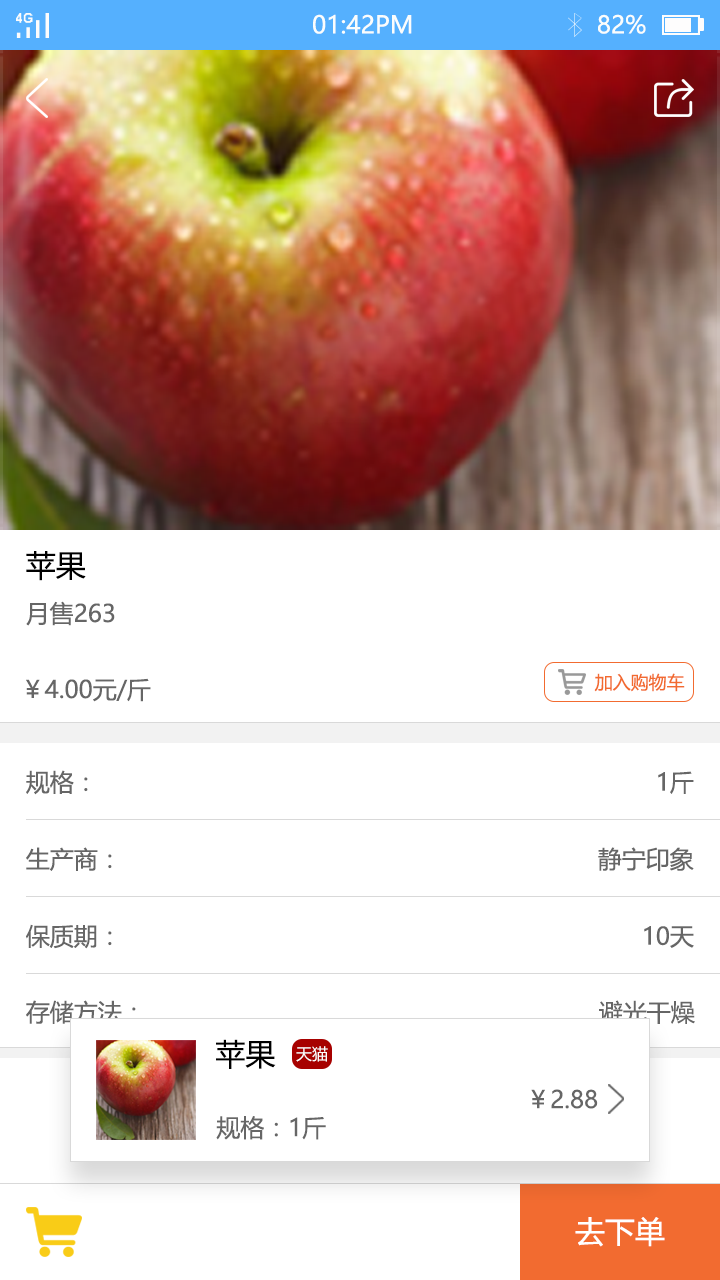
<style>
.page{position:relative;width:720px;height:1280px;background:#ffffff}
.page>*{position:absolute;margin:0}
.t1{font:24px "MicrosoftYaHei";color:#fbfdfc}
.t2{font:30px "MicrosoftYaHei";color:#000000}
.t3{font:24px "MicrosoftYaHei";color:#666666}
.t4{font:18px "MicrosoftYaHei";color:#f26b30}
.t5{font:16px "MicrosoftYaHei";color:#ffffff}
.t6{font:30px "MicrosoftYaHei";color:#ffffff}
</style>
<div class="page">
<p class="t1" style="left:313px;top:14px;width:99px;height:20px">01:42PM</p>
<p class="t1" style="left:598px;top:14px;width:48px;height:20px">82%</p>
<p class="t2" style="left:26px;top:551px;width:60px;height:30px">苹果</p>
<p class="t3" style="left:26px;top:601px;width:89px;height:25px">月售263</p>
<p class="t3" style="left:26px;top:678px;width:125px;height:24px">￥4.00元/斤</p>
<p class="t4" style="left:594px;top:673px;width:91px;height:19px">加入购物车</p>
<p class="t3" style="left:26px;top:770px;width:62px;height:25px">规格：</p>
<p class="t3" style="left:658px;top:771px;width:36px;height:23px">1斤</p>
<p class="t3" style="left:26px;top:847px;width:86px;height:24px">生产商：</p>
<p class="t3" style="left:598px;top:847px;width:96px;height:24px">静宁印象</p>
<p class="t3" style="left:26px;top:924px;width:86px;height:25px">保质期：</p>
<p class="t3" style="left:644px;top:926px;width:50px;height:22px">10天</p>
<p class="t3" style="left:26px;top:1000px;width:110px;height:24px">存储方法：</p>
<p class="t3" style="left:599px;top:1000px;width:96px;height:24px">避光干燥</p>
<p class="t2" style="left:216px;top:1039px;width:60px;height:30px">苹果</p>
<p class="t5" style="left:296px;top:1046px;width:32px;height:16px">天猫</p>
<p class="t3" style="left:531px;top:1089px;width:67px;height:20px">￥2.88</p>
<p class="t3" style="left:216px;top:1116px;width:110px;height:24px">规格：1斤</p>
<p class="t6" style="left:575px;top:1217px;width:90px;height:30px">去下单</p>
</div>
